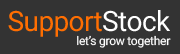
<style>
.page{position:relative;width:180px;height:54px;background:#333333}
.page>*{position:absolute;margin:0}
.t1{font:28px "Roboto-Regular";letter-spacing:-0.02em;color:#ff6e01}
.t2{font:28px "Roboto-Regular";letter-spacing:-0.02em;color:#ffffff}
.t3{font:12px "Roboto-Regular";letter-spacing:-0.02em;color:#ffffff}
</style>
<div class="page">
<p class="t1" style="left:8px;top:10px;width:162px;height:27px">Support<span class="t2">Stock</span></p>
<p class="t3" style="left:77px;top:35px;width:94px;height:13px">let’s grow together</p>
</div>
